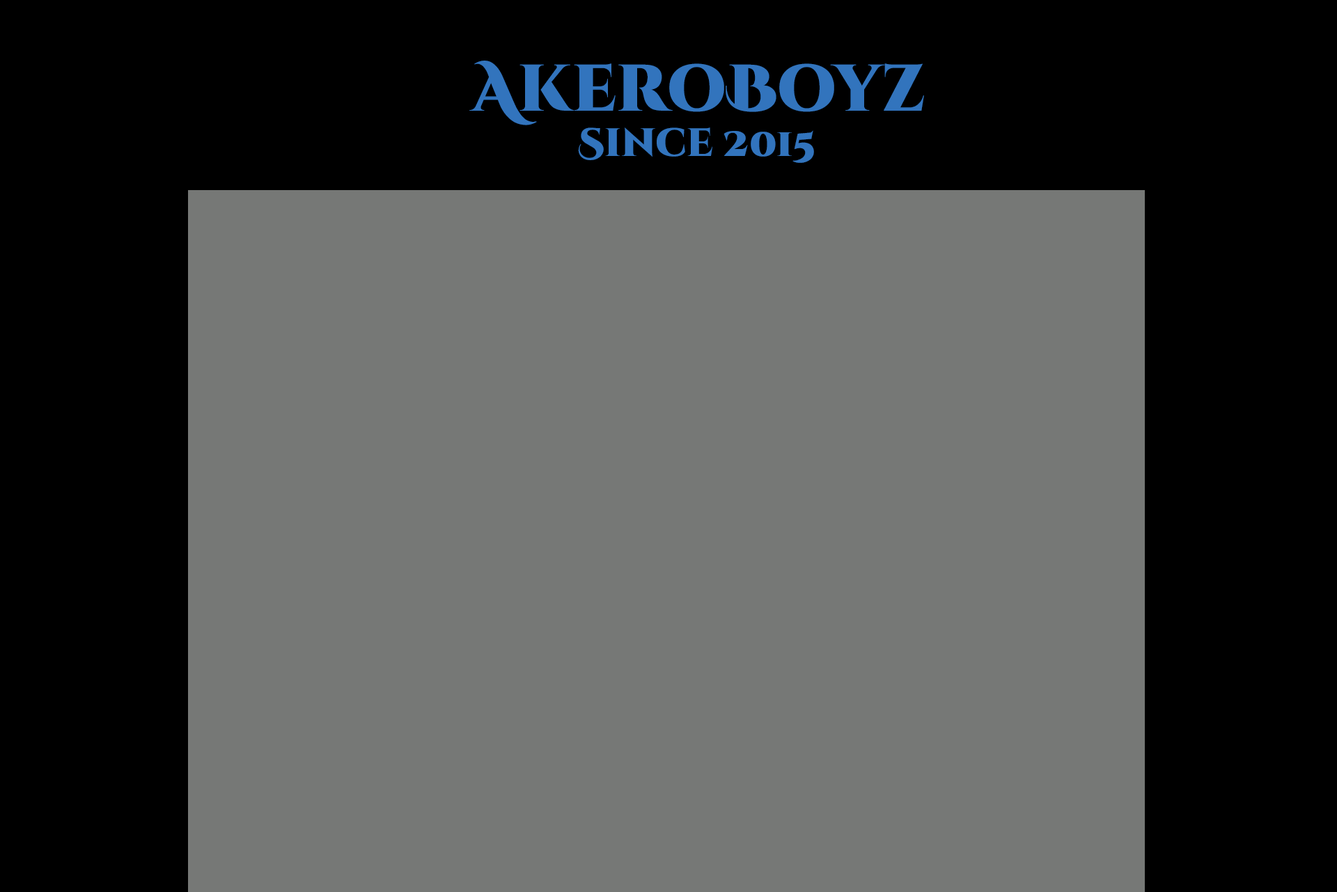
<style>
.page{position:relative;width:1337px;height:892px;background:#767876}
.page>*{position:absolute;margin:0}
.t1{font:65.8px "CinzelDecorative-Black";color:#3274bd}
.t2{font:39.5px "CinzelDecorative-Black";color:#3274bd}
</style>
<div class="page">
<p class="t1" style="left:469px;top:61px;width:455px;height:64px">AkeroBoyz</p>
<p class="t2" style="left:578px;top:127px;width:236px;height:36px">Since 2015</p>
</div>
